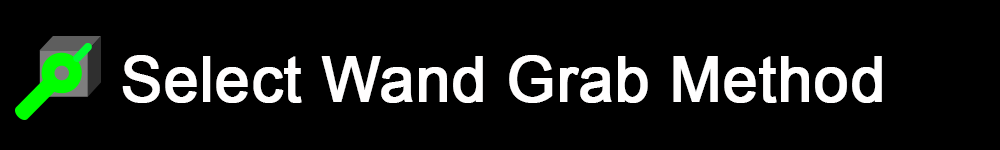
<style>
.page{position:relative;width:1000px;height:150px;background:#000000}
.page>*{position:absolute;margin:0}
.t1{font:62.5px "ArialMT";color:#fffefe;font-weight:bold}
</style>
<div class="page">
<p class="t1" style="left:122px;top:55px;width:760px;height:48px">Select Wand Grab Method</p>
</div>
